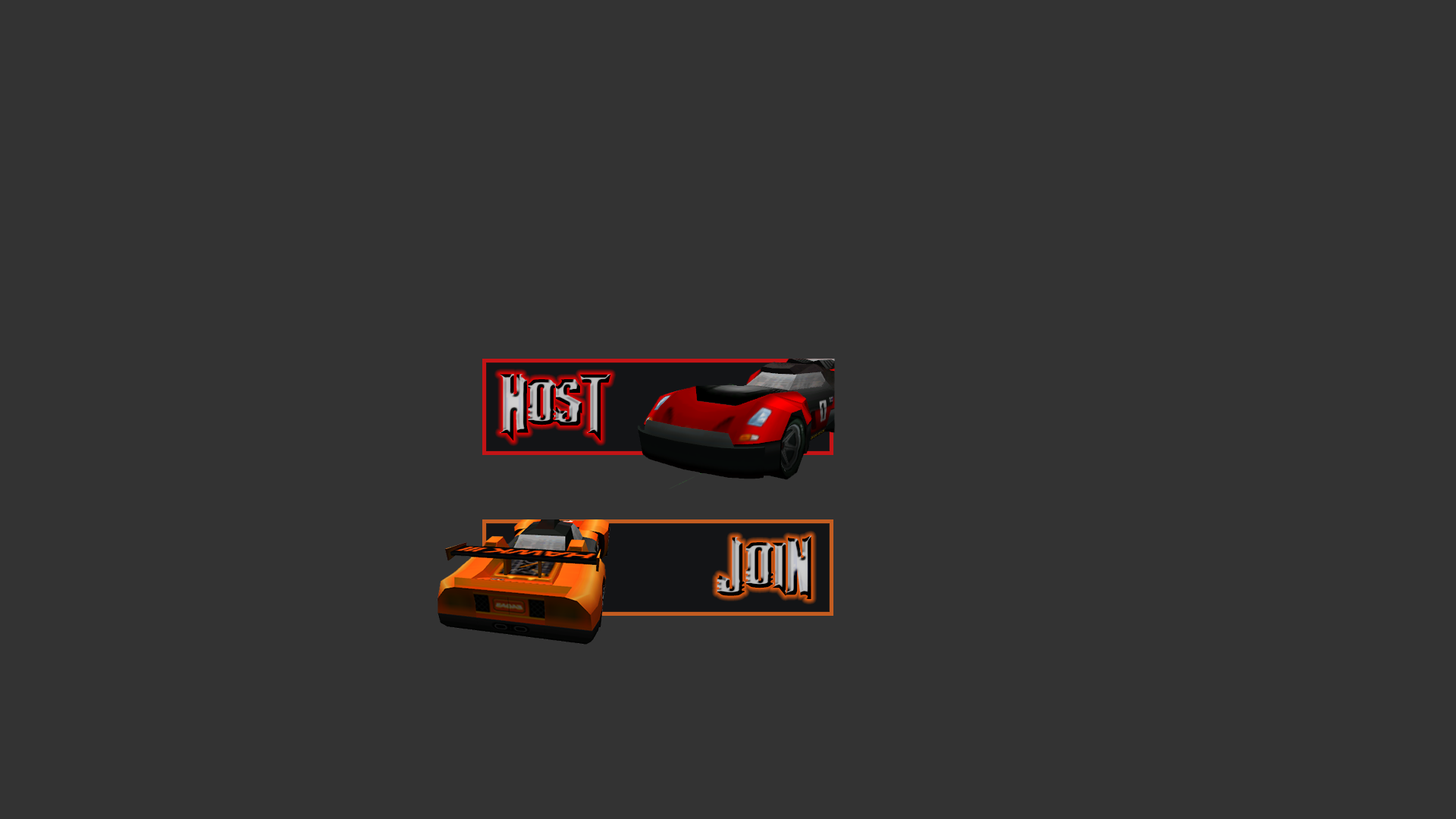
<style>
.page{position:relative;width:1456px;height:819px;background:#333333}
.page>*{position:absolute;margin:0}
.t1{font:55.9px "fontmageddon"}
</style>
<div class="page">
<p class="t1" style="left:499px;top:374px;width:112px;height:67px">HosT</p>
<p class="t1" style="left:717px;top:535px;width:94px;height:64px">JoiN</p>
</div>
